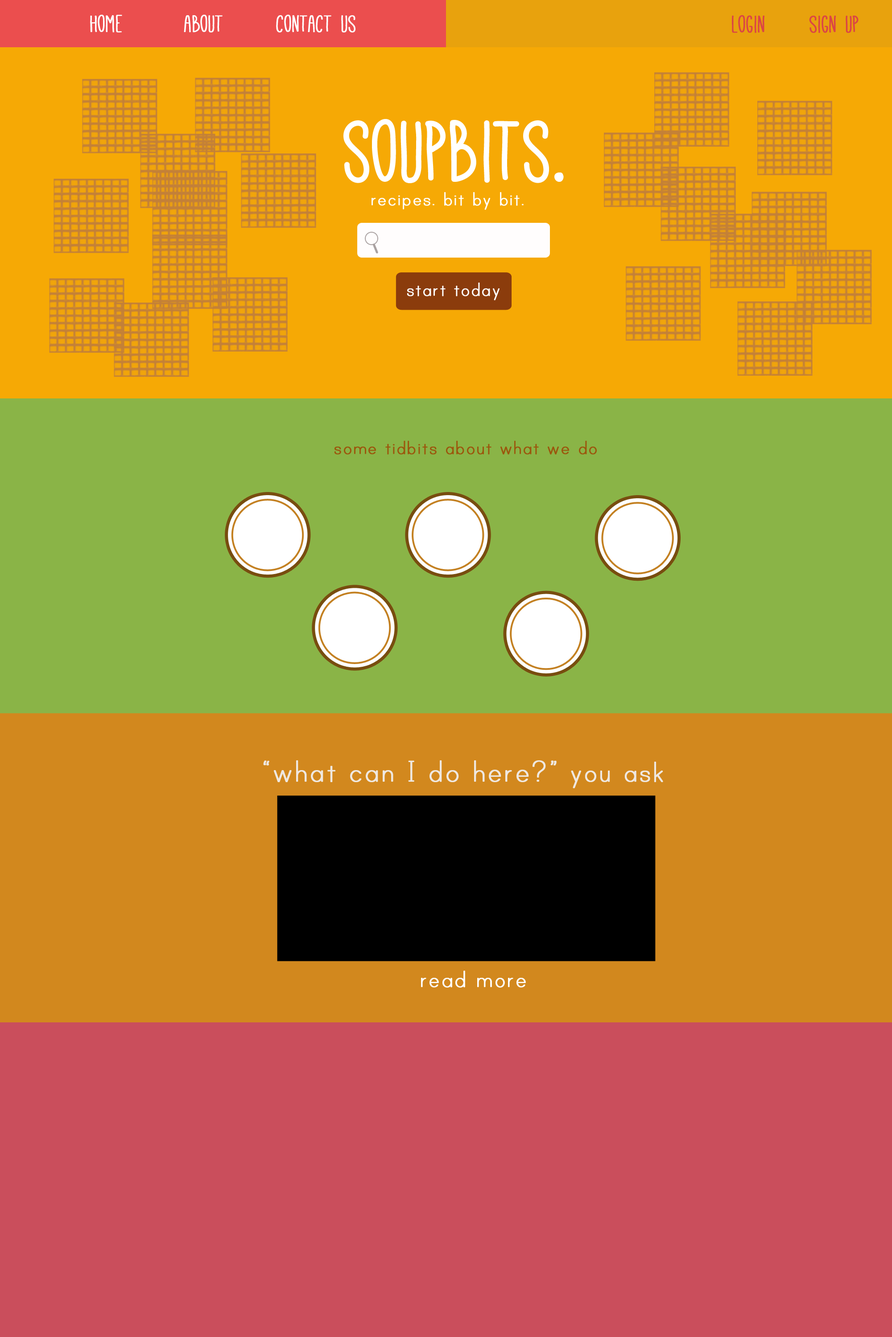
<style>
.page{position:relative;width:892px;height:1337px;background:#ca4e5c}
.page>*{position:absolute;margin:0}
.t1{font:26.7px "Mathlete-Skinny";color:#ffffff;font-weight:bold}
.t2{font:26.7px "Mathlete-Skinny";color:#db4545;font-weight:bold}
.t3{font:95px "Mathlete-Skinny";color:#ffffff;font-weight:bold}
.t4{font:21.4px "PrintClearly";color:#ffffff;font-weight:bold}
.t5{font:21.4px "PrintClearly";color:#9b570d;font-weight:bold}
.t6{font:34.3px "PrintClearly";color:#efe8e0;font-weight:bold}
.t7{font:32.1px "PrintClearly";color:#efe8e0;font-weight:bold}
.t8{font:26.7px "PrintClearly";color:#ffffff;font-weight:bold}
</style>
<div class="page">
<p class="t1" style="left:90px;top:15px;width:265px;height:18px">home       about      contact us</p>
<p class="t2" style="left:732px;top:15px;width:126px;height:18px">login     sign up</p>
<p class="t3" style="left:343px;top:119px;width:220px;height:64px">soupbits.</p>
<p class="t4" style="left:371px;top:192px;width:152px;height:18px">recipes. bit by bit.</p>
<p class="t4" style="left:407px;top:283px;width:92px;height:17px">start today</p>
<p class="t5" style="left:334px;top:441px;width:262px;height:14px">some tidbits about what we do</p>
<p class="t6" style="left:263px;top:761px;width:400px;height:28px">“what can I do here?”<span class="t7"> you ask</span></p>
<p class="t8" style="left:421px;top:971px;width:105px;height:17px">read more</p>
</div>
